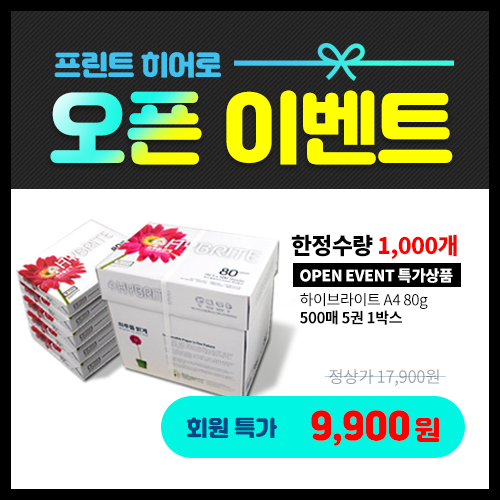
<style>
.page{position:relative;width:500px;height:500px;background:#ffffff}
.page>*{position:absolute;margin:0}
.t1{font:27.5px "Jalnan";letter-spacing:-0.025em;color:#43c1ee}
.t2{font:78.9px "Jalnan";letter-spacing:-0.025em;color:#ffff00}
.t3{font:22.7px "NotoSansCJKkr-Black";letter-spacing:-0.025em;color:#ff0000}
.t4{font:22.7px "NotoSansCJKkr-Black";letter-spacing:-0.025em;color:#000000}
.t5{font:15.4px "NotoSansCJKkr-Black";letter-spacing:-0.025em;color:#ffffff}
.t6{font:15.1px "NotoSansCJKkr-Regular";letter-spacing:-0.025em;color:#000000}
.t7{font:15.1px "NotoSansCJKkr-Bold";letter-spacing:-0.025em;color:#000000}
.t8{font:16.6px "NotoSansCJKkr-Regular";letter-spacing:-0.025em;color:#a2a2a2}
.t9{font:36.9px "Jalnan";letter-spacing:-0.025em;color:#ff0000}
.t10{font:26.6px "Jalnan";letter-spacing:-0.025em;color:#ff0000}
.t11{font:21.6px "Jalnan";letter-spacing:-0.025em;color:#004986}
</style>
<div class="page">
<p class="t1" style="left:54px;top:51px;width:167px;height:27px">프린트 히어로</p>
<p class="t2" style="left:50px;top:90px;width:403px;height:75px">오픈 이벤트</p>
<p class="t3" style="left:291px;top:234px;width:166px;height:25px"><span class="t4">한정수량 </span>1,000개</p>
<p class="t5" style="left:300px;top:268px;width:153px;height:15px">OPEN EVENT 특가상품</p>
<p class="t6" style="left:300px;top:292px;width:128px;height:33px">하이브라이트 A4 80g<br><span class="t7">500매 5권 1박스</span></p>
<p class="t8" style="left:329px;top:369px;width:110px;height:17px">정상가 17,900원</p>
<p class="t9" style="left:311px;top:410px;width:129px;height:36px">9,900<span class="t10">원</span></p>
<p class="t11" style="left:186px;top:417px;width:91px;height:21px">회원 특가</p>
</div>
